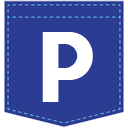
<style>
.page{position:relative;width:128px;height:128px;background:#2d3c93}
.page>*{position:absolute;margin:0}
.t1{font:85.3px "KeepCalm-Medium";color:#ffffff;font-weight:bold}
</style>
<div class="page">
<p class="t1" style="left:42px;top:32px;width:51px;height:70px">P</p>
</div>
